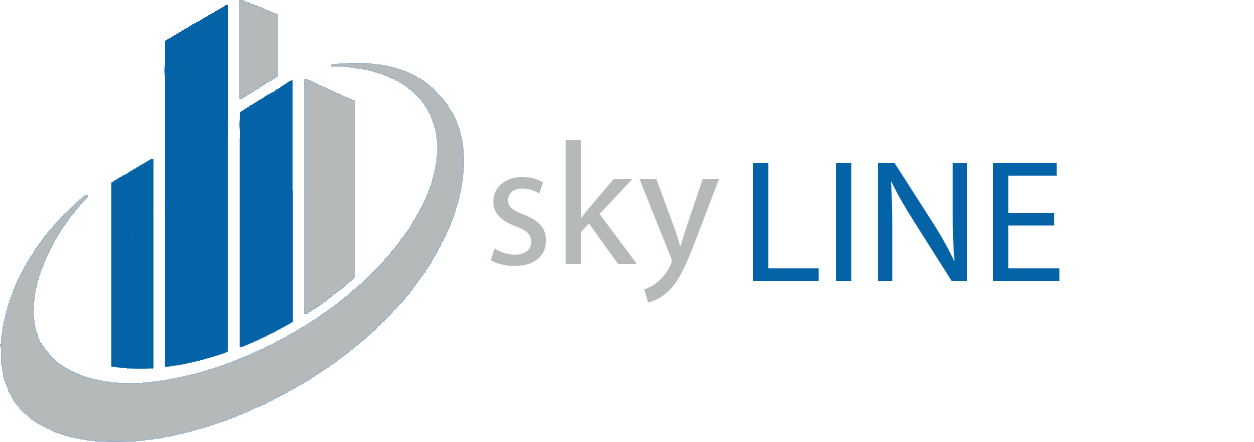
<style>
.page{position:relative;width:1254px;height:442px;background:#ffffff}
.page>*{position:absolute;margin:0}
.t1{font:175px "MyriadPro-Regular";color:#b5b9ba}
.t2{font:175px "MyriadPro-Regular";color:#0463a7}
</style>
<div class="page">
<p class="t1" style="left:490px;top:140px;width:229px;height:163px">sky</p>
<p class="t2" style="left:753px;top:163px;width:307px;height:119px">LINE</p>
</div>
